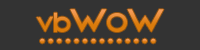
<style>
.page{position:relative;width:200px;height:50px;background:#333333}
.page>*{position:absolute;margin:0}
.t1{font:24px "Warren1";color:#df8118}
.t2{font:36px "Warren1";color:#df8118}
.t3{font:30px "Warren1";color:#df8118}
.t4{font:24px "Warren1"}
</style>
<div class="page">
<p class="t1" style="left:36px;top:9px;width:128px;height:23px">VB<span class="t2">W</span><span class="t3">O</span><span class="t2">W</span></p>
<p class="t4" style="left:40px;top:38px;width:116px;height:6px">..............</p>
</div>
